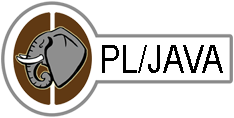
<style>
.page{position:relative;width:234px;height:118px;background:#ffffff}
.page>*{position:absolute;margin:0}
.t1{font:38.8px "ArialMT";color:#000000;scale:0.83 1}
</style>
<div class="page">
<p class="t1" style="left:102px;top:45px;width:121px;height:28px">PL/JAVA</p>
</div>
